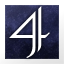
<style>
.page{position:relative;width:64px;height:64px;background:#ffffff}
.page>*{position:absolute;margin:0}
.t1{font:83.2px "ColonnaMT";color:#ffffff}
</style>
<div class="page">
<p class="t1" style="left:9px;top:6px;width:41px;height:52px">4</p>
</div>
